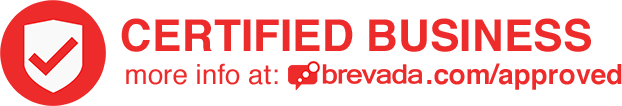
<style>
.page{position:relative;width:622px;height:106px;background:#ffffff}
.page>*{position:absolute;margin:0}
.t1{font:44px "Helvetica-Bold";color:#ee2b2b}
.t2{font:27.7px "Helvetica";color:#ee2b2b}
.t3{font:27.7px "Helvetica-Bold";color:#ee2b2b}
</style>
<div class="page">
<p class="t1" style="left:121px;top:18px;width:470px;height:34px">CERTIFIED BUSINESS</p>
<p class="t2" style="left:126px;top:63px;width:496px;height:27px">more info at:                   <span class="t3">.com/approved</span></p>
</div>
